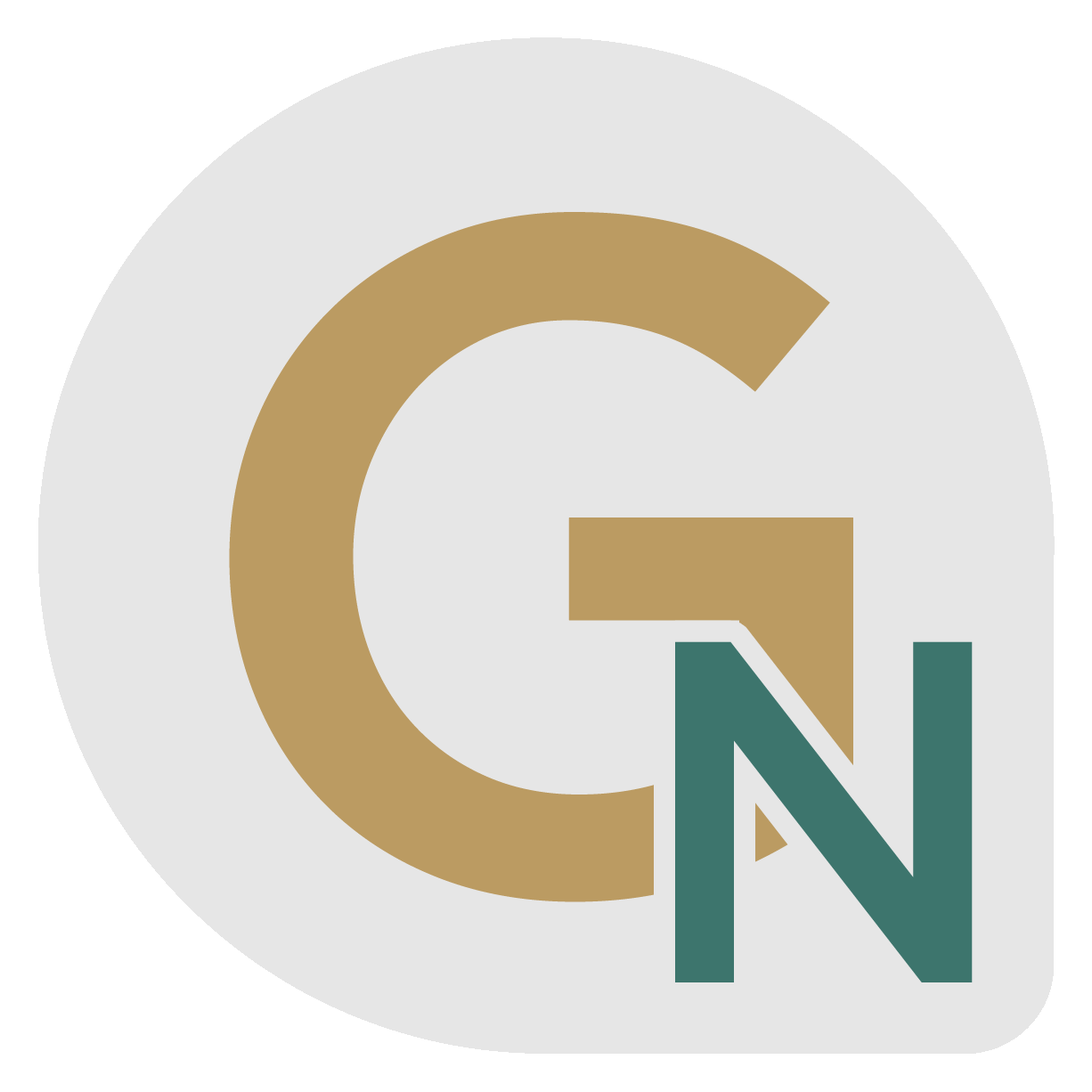
<style>
.page{position:relative;width:1092px;height:1092px;background:#e6e6e6}
.page>*{position:absolute;margin:0}
.t1{font:951.3px "Gotham-Medium";color:#bb9b62;font-weight:bold}
.t2{font:486.2px "Gotham-Medium";color:#3d756d}
</style>
<div class="page">
<p class="t1" style="left:229px;top:212px;width:624px;height:690px">G</p>
<p class="t2" style="left:675px;top:641px;width:298px;height:341px">N</p>
</div>
